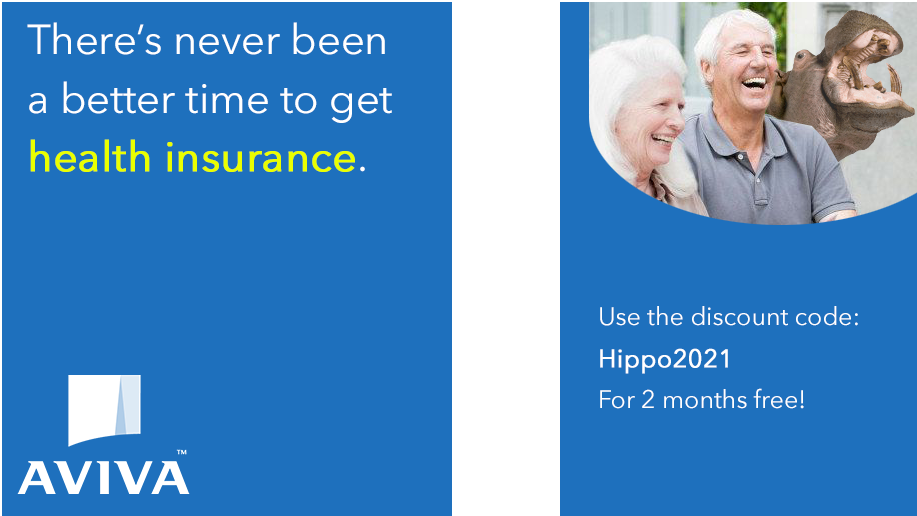
<style>
.page{position:relative;width:917px;height:516px;background:#1e70bd}
.page>*{position:absolute;margin:0}
.t1{font:41.7px/58.3px "AvenirNext-Regular";color:#ffffff}
.t2{font:41.7px/58.3px "AvenirNext-Regular";color:#eaff00;font-weight:bold}
.t3{font:25px/41.7px "AvenirNext-Regular";color:#ffffff}
.t4{font:25px/41.7px "AvenirNext-Regular";color:#ffffff;font-weight:bold}
</style>
<div class="page">
<p class="t1" style="left:27px;top:22px;width:365px;height:150px">There’s never been <br>a better time to get <span class="t2">health insurance</span>.</p>
<p class="t3" style="left:600px;top:306px;width:258px;height:103px">Use the discount code:<br><span class="t4">Hippo2021<br></span>For 2 months free!</p>
</div>
